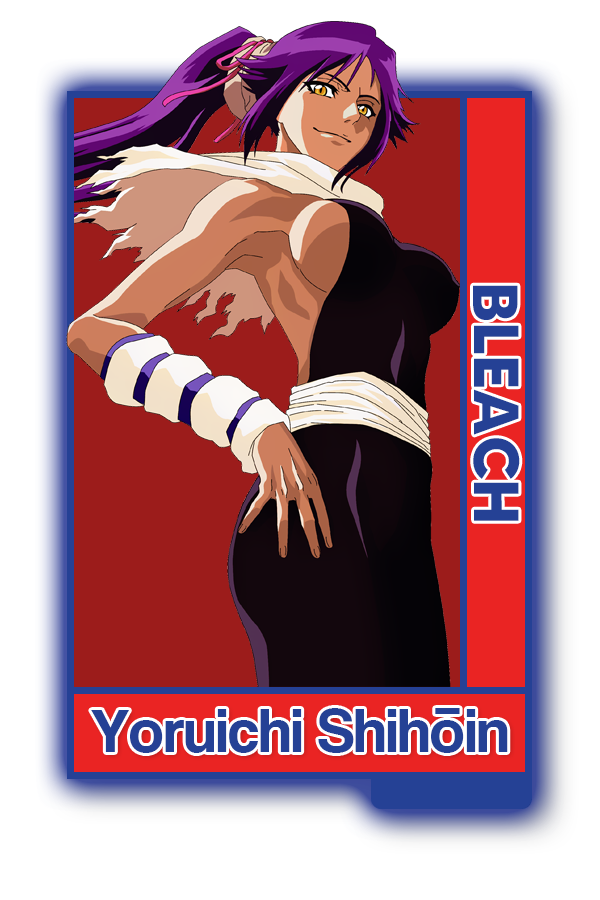
<style>
.page{position:relative;width:600px;height:900px;background:#ffffff}
.page>*{position:absolute;margin:0}
.t1{font:63.6px "MADETOMMY-Bold";color:#254195}
.t2{font:63.6px "CoolveticaRg-Regular";color:#254195}
</style>
<div class="page">
<p class="t1" style="left:473px;top:285px;width:47px;height:236px;rotate:90deg">BLEACH</p>
<p class="t2" style="left:91px;top:708px;width:417px;height:45px">Yoruichi Shihōin</p>
</div>
